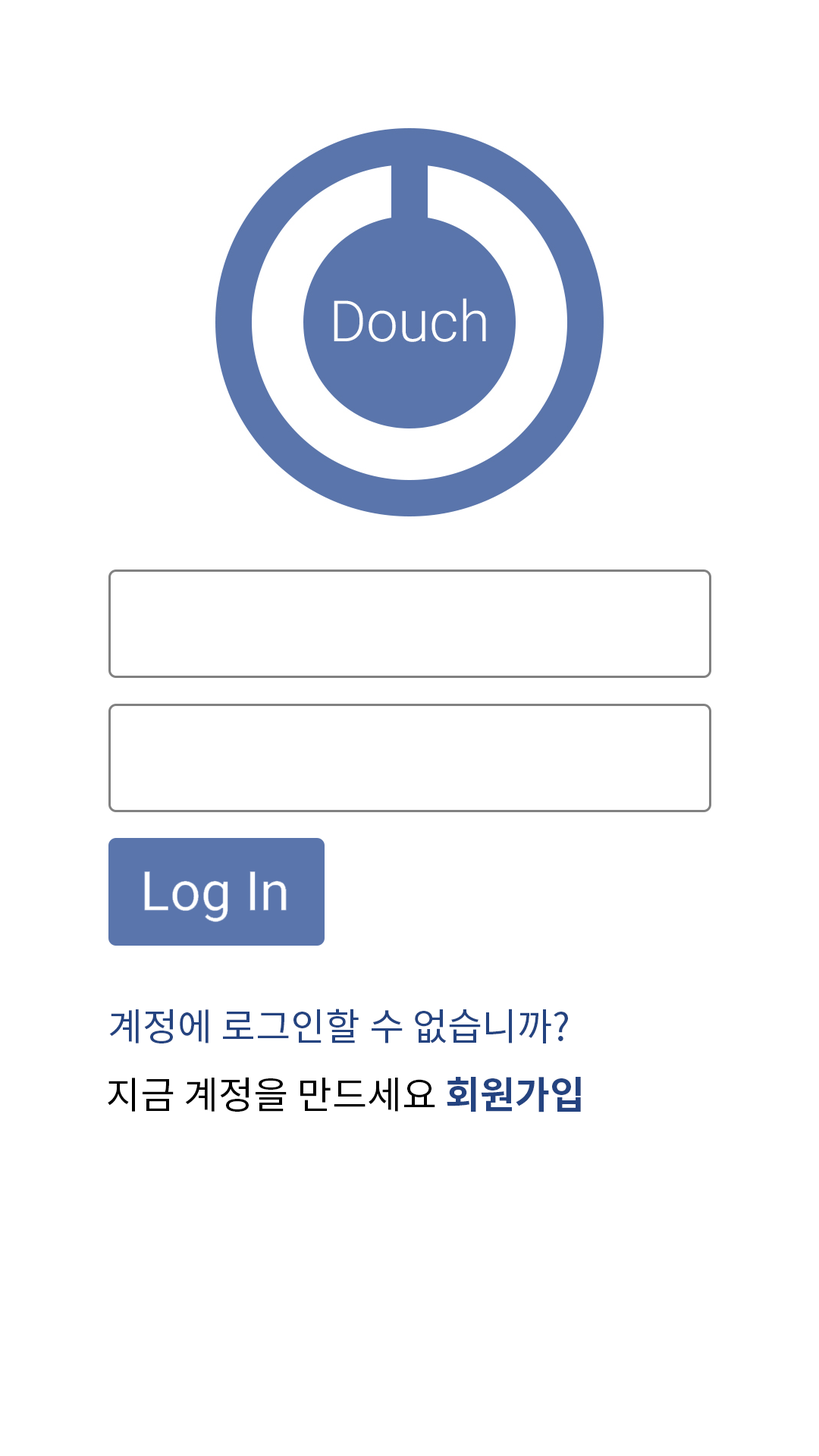
<style>
.page{position:relative;width:819px;height:1456px;background:#ffffff}
.page>*{position:absolute;margin:0}
.t1{font:37.9px "NotoSansCJKkr-Regular";color:#244380}
.t2{font:37.9px "NotoSansCJKkr-Regular";color:#000000}
.t3{font:37.9px "NotoSansCJKkr-Bold";color:#244380}
</style>
<div class="page">
<p class="t1" style="left:109px;top:1009px;width:459px;height:34px">계정에 로그인할 수 없습니까?</p>
<p class="t2" style="left:108px;top:1077px;width:473px;height:35px">지금 계정을 만드세요 <span class="t3">회원가입</span></p>
</div>
